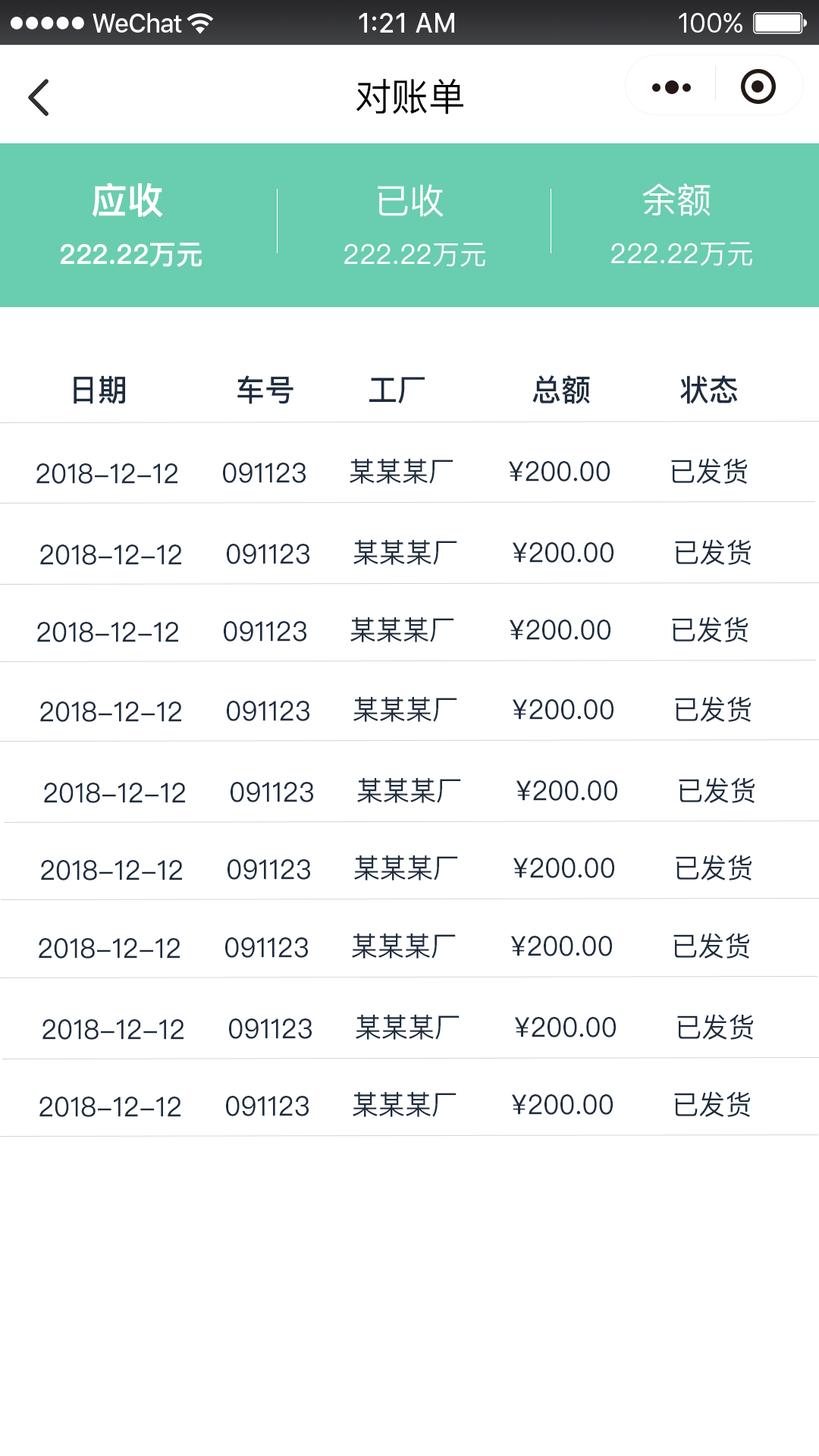
<style>
.page{position:relative;width:819px;height:1456px;background:#ffffff}
.page>*{position:absolute;margin:0}
.t1{font:37.9px "PingFangSC-Regular";color:#000000}
.t2{font:36.4px "PingFangSC-Semibold";color:#ffffff}
.t3{font:34.9px "PingFangSC-Regular";color:#ffffff}
.t4{font:27.3px "PingFangSC-Semibold";color:#ffffff}
.t5{font:27.3px "PingFangSC-Regular";color:#ffffff}
.t6{font:30.3px "PingFangSC-Medium";color:#1e2c3e}
.t7{font:27.3px "PingFangSC-Regular";color:#1e2c3e}
</style>
<div class="page">
<p class="t1" style="left:356px;top:78px;width:107px;height:37px">对账单</p>
<p class="t2" style="left:92px;top:183px;width:71px;height:35px">应收</p>
<p class="t3" style="left:378px;top:184px;width:66px;height:33px">已收</p>
<p class="t3" style="left:642px;top:184px;width:69px;height:32px">余额</p>
<p class="t4" style="left:60px;top:243px;width:142px;height:24px">222.22万元</p>
<p class="t5" style="left:344px;top:243px;width:141px;height:24px">222.22万元</p>
<p class="t5" style="left:611px;top:242px;width:141px;height:24px">222.22万元</p>
<p class="t6" style="left:74px;top:375px;width:51px;height:29px">日期</p>
<p class="t6" style="left:237px;top:375px;width:56px;height:29px">车号</p>
<p class="t6" style="left:369px;top:377px;width:56px;height:27px">工厂</p>
<p class="t6" style="left:532px;top:375px;width:58px;height:29px">总额</p>
<p class="t6" style="left:680px;top:375px;width:58px;height:29px">状态</p>
<p class="t7" style="left:350px;top:459px;width:103px;height:25px">某某某厂</p>
<p class="t7" style="left:508px;top:461px;width:102px;height:21px">¥200.00</p>
<p class="t7" style="left:671px;top:458px;width:77px;height:26px">已发货</p>
<p class="t7" style="left:36px;top:463px;width:141px;height:21px">2018-12-12</p>
<p class="t7" style="left:223px;top:463px;width:83px;height:20px">091123</p>
<p class="t7" style="left:40px;top:544px;width:141px;height:21px">2018-12-12</p>
<p class="t7" style="left:227px;top:544px;width:82px;height:20px">091123</p>
<p class="t7" style="left:353px;top:540px;width:104px;height:25px">某某某厂</p>
<p class="t7" style="left:512px;top:542px;width:101px;height:21px">¥200.00</p>
<p class="t7" style="left:675px;top:539px;width:76px;height:26px">已发货</p>
<p class="t7" style="left:350px;top:617px;width:104px;height:25px">某某某厂</p>
<p class="t7" style="left:672px;top:617px;width:76px;height:25px">已发货</p>
<p class="t7" style="left:37px;top:622px;width:141px;height:20px">2018-12-12</p>
<p class="t7" style="left:224px;top:621px;width:82px;height:21px">091123</p>
<p class="t7" style="left:509px;top:620px;width:101px;height:20px">¥200.00</p>
<p class="t7" style="left:40px;top:701px;width:141px;height:21px">2018-12-12</p>
<p class="t7" style="left:227px;top:701px;width:82px;height:20px">091123</p>
<p class="t7" style="left:353px;top:697px;width:104px;height:25px">某某某厂</p>
<p class="t7" style="left:512px;top:699px;width:101px;height:21px">¥200.00</p>
<p class="t7" style="left:675px;top:696px;width:76px;height:26px">已发货</p>
<p class="t7" style="left:44px;top:783px;width:141px;height:20px">2018-12-12</p>
<p class="t7" style="left:231px;top:782px;width:82px;height:20px">091123</p>
<p class="t7" style="left:357px;top:778px;width:104px;height:25px">某某某厂</p>
<p class="t7" style="left:516px;top:780px;width:101px;height:21px">¥200.00</p>
<p class="t7" style="left:679px;top:777px;width:76px;height:26px">已发货</p>
<p class="t7" style="left:354px;top:855px;width:104px;height:25px">某某某厂</p>
<p class="t7" style="left:513px;top:858px;width:101px;height:20px">¥200.00</p>
<p class="t7" style="left:676px;top:855px;width:76px;height:25px">已发货</p>
<p class="t7" style="left:41px;top:860px;width:141px;height:20px">2018-12-12</p>
<p class="t7" style="left:227px;top:859px;width:83px;height:21px">091123</p>
<p class="t7" style="left:39px;top:938px;width:141px;height:21px">2018-12-12</p>
<p class="t7" style="left:225px;top:937px;width:83px;height:21px">091123</p>
<p class="t7" style="left:352px;top:933px;width:104px;height:26px">某某某厂</p>
<p class="t7" style="left:510px;top:936px;width:102px;height:20px">¥200.00</p>
<p class="t7" style="left:673px;top:933px;width:77px;height:26px">已发货</p>
<p class="t7" style="left:677px;top:1014px;width:77px;height:26px">已发货</p>
<p class="t7" style="left:42px;top:1019px;width:142px;height:21px">2018-12-12</p>
<p class="t7" style="left:229px;top:1018px;width:83px;height:21px">091123</p>
<p class="t7" style="left:356px;top:1015px;width:104px;height:25px">某某某厂</p>
<p class="t7" style="left:514px;top:1017px;width:102px;height:20px">¥200.00</p>
<p class="t7" style="left:39px;top:1097px;width:141px;height:20px">2018-12-12</p>
<p class="t7" style="left:226px;top:1096px;width:83px;height:20px">091123</p>
<p class="t7" style="left:353px;top:1092px;width:104px;height:25px">某某某厂</p>
<p class="t7" style="left:511px;top:1094px;width:102px;height:21px">¥200.00</p>
<p class="t7" style="left:674px;top:1091px;width:77px;height:26px">已发货</p>
</div>
